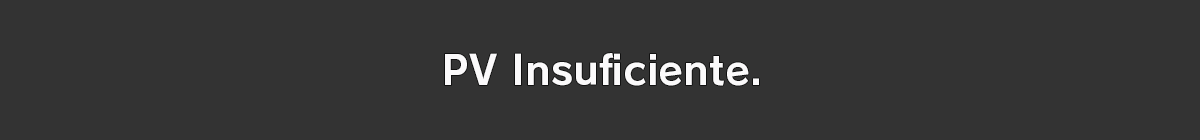
<style>
.page{position:relative;width:1200px;height:140px;background:#333333}
.page>*{position:absolute;margin:0}
.t1{font:40px "RodinPro-B";color:#fbfafb}
</style>
<div class="page">
<p class="t1" style="left:445px;top:53px;width:314px;height:33px">PV Insuficiente.</p>
</div>
